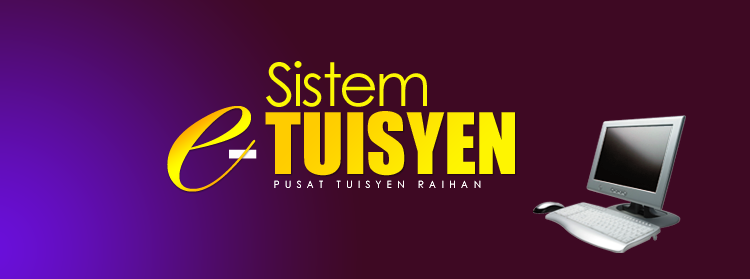
<style>
.page{position:relative;width:750px;height:279px;background:#3e0923}
.page>*{position:absolute;margin:0}
.t1{font:60px "CenturyGothic";letter-spacing:-0.05em;color:#fbf803;font-weight:bold}
.t2{font:309.4px "EdwardianScriptITC";letter-spacing:-0.1em}
.t3{font:78px "Impact";color:#ffe101;text-transform:uppercase}
.t4{font:100px "ArialMT";letter-spacing:-0.1em;color:#fefdfd}
.t5{font:10px "CenturyGothic";letter-spacing:0.52em;color:#fefefd;font-weight:bold}
</style>
<div class="page">
<p class="t1" style="left:266px;top:61px;width:161px;height:46px">Sistem</p>
<p class="t2" style="left:167px;top:106px;width:89px;height:86px">e</p>
<p class="t3" style="left:265px;top:111px;width:250px;height:65px">TUISYEN</p>
<p class="t4" style="left:229px;top:149px;width:28px;height:10px">-</p>
<p class="t5" style="left:274px;top:180px;width:207px;height:8px">PUSAT TUISYEN RAIHAN</p>
</div>
